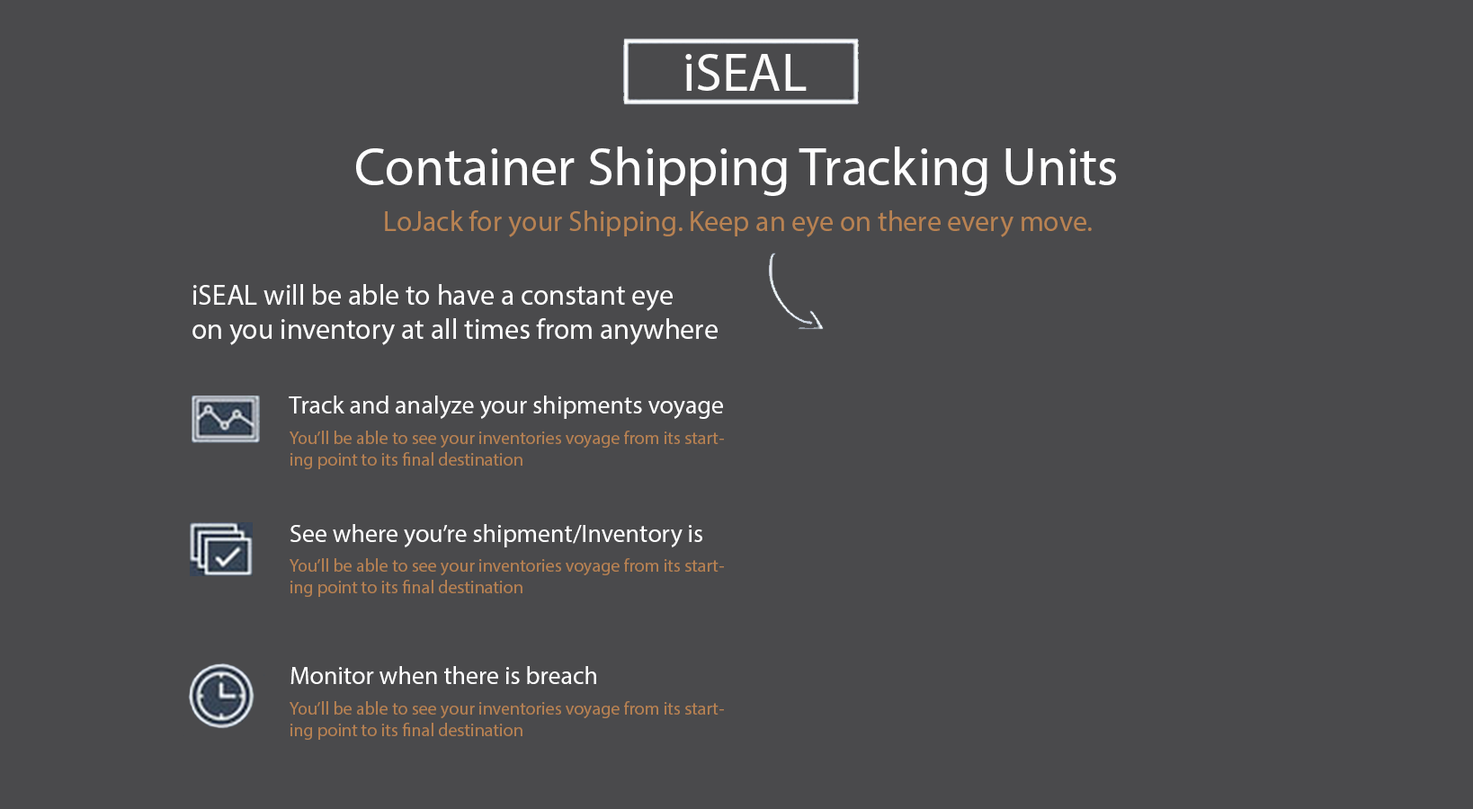
<style>
.page{position:relative;width:1473px;height:809px;background:#4a4a4c}
.page>*{position:absolute;margin:0}
.t1{font:54px "MyriadPro-Regular";color:#fcfbfb}
.t2{font:54px "MyriadPro-Regular";color:#fefeff}
.t3{font:28.8px "MyriadPro-Regular";color:#b88252}
.t4{font:28.8px "MyriadPro-Regular";color:#fefeff}
.t5{font:25.2px "MyriadPro-Regular";color:#fefeff}
.t6{font:18px "MyriadPro-Regular";color:#b88252}
</style>
<div class="page">
<p class="t1" style="left:685px;top:54px;width:122px;height:37px">iSEAL</p>
<p class="t2" style="left:356px;top:147px;width:760px;height:49px">Container Shipping Tracking Units</p>
<p class="t3" style="left:385px;top:210px;width:707px;height:27px">LoJack for your Shipping. Keep an eye on there every move.</p>
<p class="t4" style="left:192px;top:284px;width:526px;height:61px">iSEAL will be able to have a constant eye <br>on you inventory at all times from anywhere</p>
<p class="t5" style="left:289px;top:396px;width:434px;height:23px">Track and analyze your shipments voyage</p>
<p class="t6" style="left:290px;top:431px;width:434px;height:38px">You’ll be able to see your inventories voyage from its starting point to its final destination</p>
<p class="t5" style="left:290px;top:524px;width:412px;height:24px">See where you’re shipment/Inventory is</p>
<p class="t6" style="left:290px;top:559px;width:434px;height:38px">You’ll be able to see your inventories voyage from its starting point to its final destination</p>
<p class="t5" style="left:290px;top:666px;width:306px;height:18px">Monitor when there is breach</p>
<p class="t6" style="left:290px;top:702px;width:434px;height:38px">You’ll be able to see your inventories voyage from its starting point to its final destination</p>
</div>
